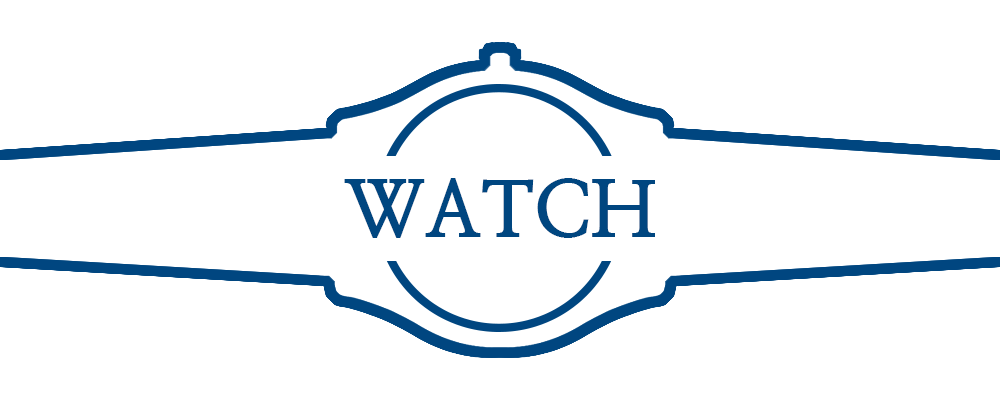
<style>
.page{position:relative;width:1000px;height:400px;background:#ffffff}
.page>*{position:absolute;margin:0}
.t1{font:78.4px "NanumMyeongjoExtraBold";color:#004680}
</style>
<div class="page">
<p class="t1" style="left:344px;top:178px;width:311px;height:60px">WATCH</p>
</div>
